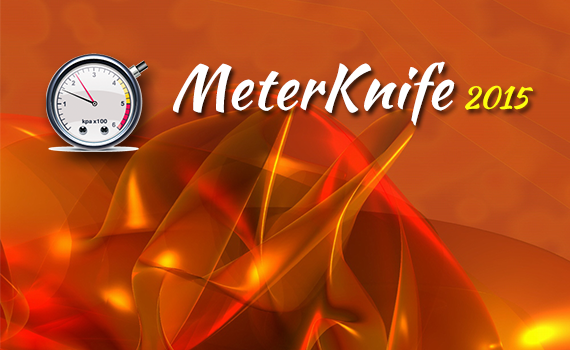
<style>
.page{position:relative;width:570px;height:350px}
.page>*{position:absolute;margin:0}
.t1{font:60px "KaushanScript-Regular";color:#ffffff}
.t2{font:30px "KaushanScript-Regular";color:#fdfd0e}
</style>
<div class="page">
<p class="t1" style="left:173px;top:61px;width:360px;height:65px">MeterKnife <span class="t2">2015</span></p>
</div>
